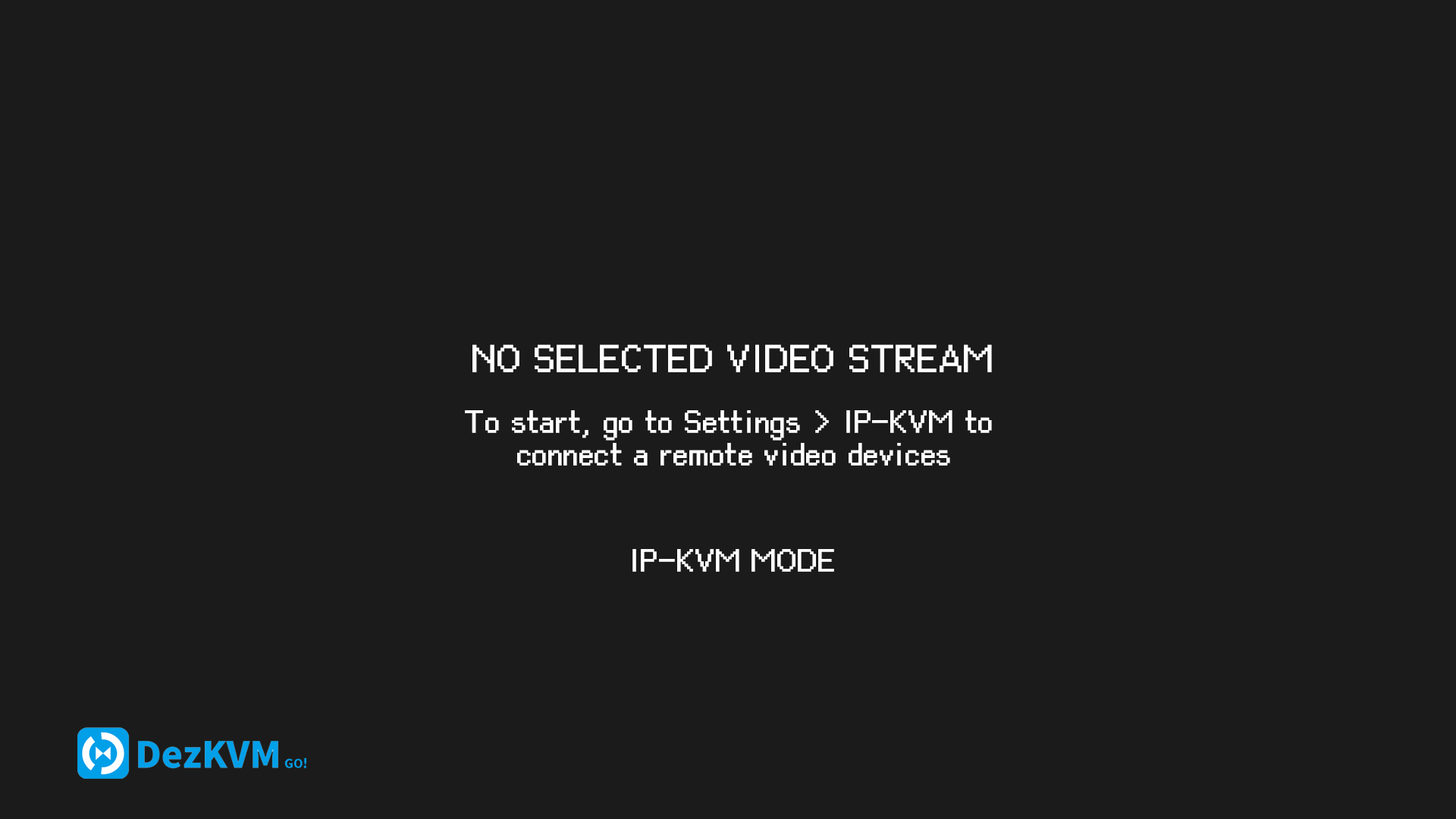
<style>
.page{position:relative;width:1456px;height:819px;background:#1b1b1b}
.page>*{position:absolute;margin:0}
.t1{font:35.6px "Cubic_11";color:#ffffff;font-weight:bold}
.t2{font:29.6px/32.6px "Cubic_11";color:#ffffff;font-weight:bold}
.t3{font:29.6px "Cubic_11";color:#ffffff;font-weight:bold}
</style>
<div class="page">
<p class="t1" style="left:472px;top:344px;width:520px;height:28px">NO SELECTED VIDEO STREAM</p>
<p class="t2" style="left:465px;top:410px;width:527px;height:56px;text-align:center">To start, go to Settings &gt; IP-KVM to <br>connect a remote video devices</p>
<p class="t3" style="left:632px;top:549px;width:202px;height:23px">IP-KVM MODE</p>
</div>
